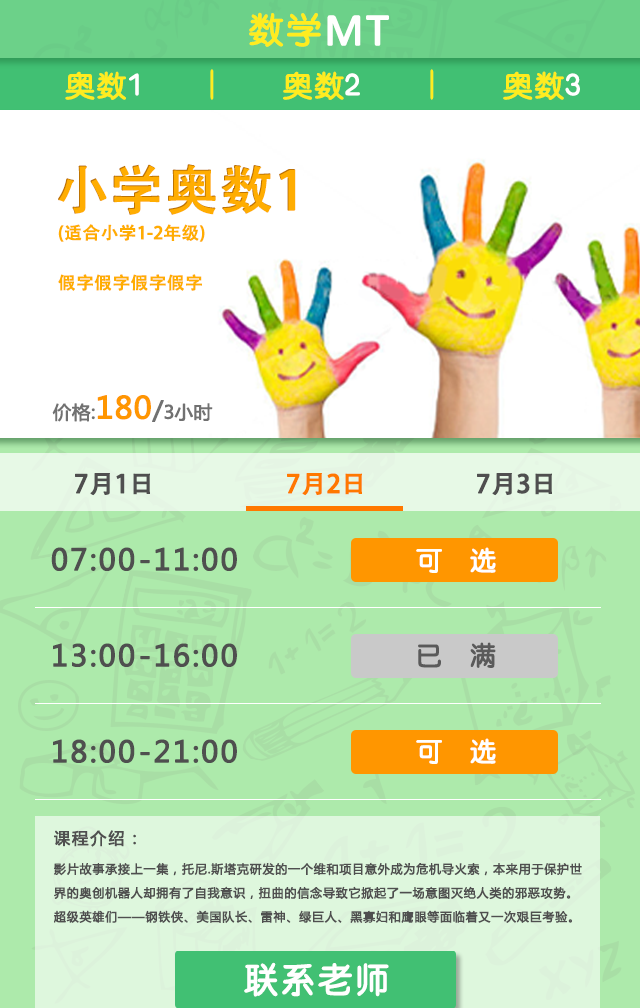
<style>
.page{position:relative;width:640px;height:1008px;background:#ffffff}
.page>*{position:absolute;margin:0}
.t1{font:35.5px "HYe3gj";letter-spacing:0.075em;color:#ffec1f;text-transform:uppercase;font-weight:bold}
.t2{font:45.8px "Calibri";color:#fffffe;text-transform:uppercase;font-weight:bold}
.t3{font:29.6px "HYe3gj";color:#ffec1f;text-transform:uppercase;font-weight:bold}
.t4{font:29.6px "HYe3gj";color:#ffffff;text-transform:uppercase;font-weight:bold}
.t5{font:39.9px "HYe3gj";color:#ffec1f;text-transform:uppercase;font-weight:bold;scale:0.61 1}
.t6{font:53.3px "AdobeHeitiStd-Regular";color:#ffad01;text-transform:uppercase;font-weight:bold}
.t7{font:17.2px "AdobeHeitiStd-Regular";color:#ffad01;text-transform:uppercase;font-weight:bold}
.t8{font:18px "MicrosoftYaHei";color:#717171;text-transform:uppercase;font-weight:bold}
.t9{font:30px "MicrosoftYaHei";color:#ff9600;text-transform:uppercase;font-weight:bold}
.t10{font:24px "MicrosoftYaHei";color:#717171;text-transform:uppercase;font-weight:bold}
.t11{font:24.9px "AdobeHeitiStd-Regular";color:#4f4f4f;text-transform:uppercase;font-weight:bold}
.t12{font:24.9px "AdobeHeitiStd-Regular";color:#ff7800;text-transform:uppercase;font-weight:bold}
.t13{font:28.9px "MicrosoftYaHei";letter-spacing:0.05em;color:#4f4f4f;text-transform:uppercase;font-weight:bold}
.t14{font:26.7px "HYe3gj";color:#ffffff;text-transform:uppercase;font-weight:bold}
.t15{font:26.7px "HYe3gj";color:#5a5a5a;text-transform:uppercase;font-weight:bold}
.t16{font:16px "MicrosoftYaHei";letter-spacing:0.075em;color:#4f4f4f;font-weight:bold}
.t17{font:12px/23.9px "MicrosoftYaHei";letter-spacing:0.075em;color:#4f4f4f;font-weight:bold}
.t18{font:34.9px "HYe3gj";letter-spacing:0.05em;color:#ffffff;text-transform:uppercase;font-weight:bold}
</style>
<div class="page">
<p class="t1" style="left:249px;top:12px;width:140px;height:35px">数学<span class="t2">MT</span></p>
<p class="t3" style="left:65px;top:71px;width:74px;height:29px">奥数<span class="t4">1</span></p>
<p class="t5" style="left:210px;top:69px;width:4px;height:31px">I</p>
<p class="t3" style="left:283px;top:71px;width:77px;height:29px">奥数<span class="t4">2</span></p>
<p class="t5" style="left:430px;top:69px;width:4px;height:31px">I</p>
<p class="t3" style="left:503px;top:71px;width:77px;height:29px">奥数<span class="t4">3</span></p>
<p class="t6" style="left:58px;top:164px;width:238px;height:51px">小学奥数1</p>
<p class="t7" style="left:58px;top:224px;width:147px;height:18px">(适合小学1-2年级)</p>
<p class="t7" style="left:58px;top:274px;width:144px;height:17px">假字假字假字假字</p>
<p class="t8" style="left:52px;top:395px;width:161px;height:27px">价格:<span class="t9">180</span><span class="t10">/</span>3小时</p>
<p class="t11" style="left:75px;top:473px;width:75px;height:23px">7月1日</p>
<p class="t12" style="left:287px;top:473px;width:75px;height:23px">7月2日</p>
<p class="t11" style="left:477px;top:473px;width:75px;height:23px">7月3日</p>
<p class="t13" style="left:51px;top:547px;width:186px;height:24px">07:00-11:00</p>
<p class="t14" style="left:416px;top:547px;width:80px;height:26px">可  选</p>
<p class="t13" style="left:53px;top:643px;width:184px;height:24px">13:00-16:00</p>
<p class="t15" style="left:418px;top:642px;width:78px;height:26px">已  满</p>
<p class="t13" style="left:53px;top:739px;width:184px;height:24px">18:00-21:00</p>
<p class="t14" style="left:416px;top:738px;width:80px;height:26px">可  选</p>
<p class="t16" style="left:54px;top:830px;width:82px;height:17px">课程介绍：</p>
<p class="t17" style="left:54px;top:862px;width:528px;height:61px">影片故事承接上一集，托尼.斯塔克研发的一个维和项目意外成为危机导火索，本来用于保护世<br>界的奥创机器人却拥有了自我意识，扭曲的信念导致它掀起了一场意图灭绝人类的邪恶攻势。<br>超级英雄们——钢铁侠、美国队长、雷神、绿巨人、黑寡妇和鹰眼等面临着又一次艰巨考验。</p>
<p class="t18" style="left:244px;top:962px;width:145px;height:35px">联系老师</p>
</div>
